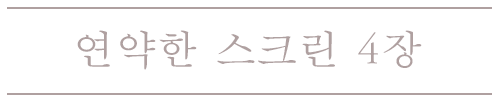
<style>
.page{position:relative;width:500px;height:100px;background:#ffffff}
.page>*{position:absolute;margin:0}
.t1{font:41.7px "SMSSMyungJo10Std-Regular";color:#afa0a0}
</style>
<div class="page">
<p class="t1" style="left:77px;top:30px;width:345px;height:40px">연약한 스크린 4장</p>
</div>
